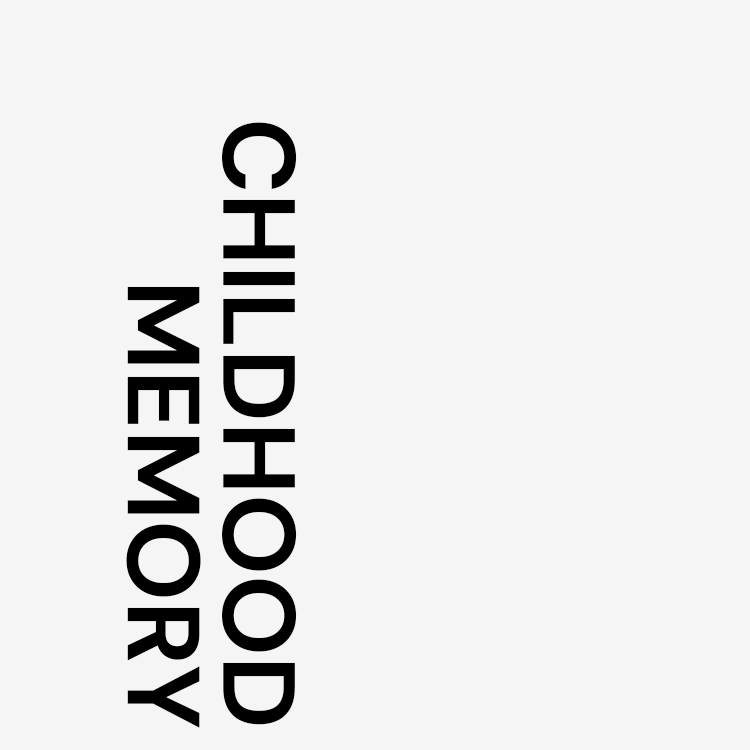
<style>
.page{position:relative;width:750px;height:750px;background:#f5f5f5}
.page>*{position:absolute;margin:0}
.t1{font:102.5px/95.6px "DMSans-Bold";color:#000000;text-transform:uppercase}
</style>
<div class="page">
<p class="t1" style="left:126px;top:122px;width:171px;height:606px;text-align:right">childhood<br>memory</p>
</div>
